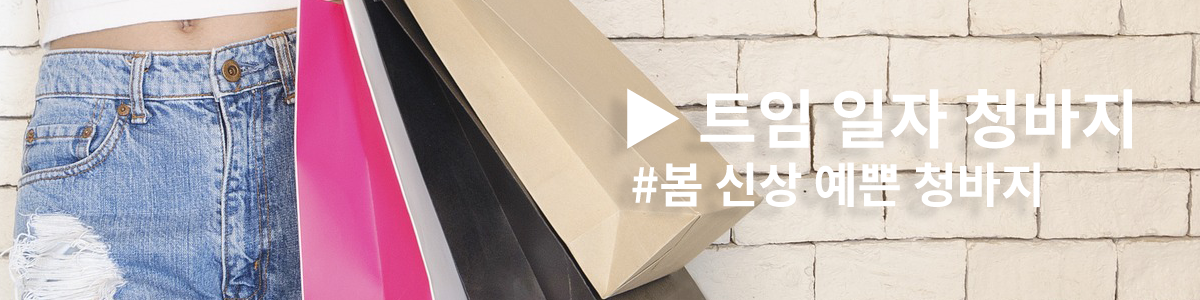
<style>
.page{position:relative;width:1200px;height:300px}
.page>*{position:absolute;margin:0}
.t1{font:48px "NotoSansKR-Bold";color:#ffffff}
.t2{font:64px "NotoSansKR-Bold";color:#ffffff}
</style>
<div class="page">
<p class="t1" style="left:627px;top:88px;width:505px;height:119px"><span class="t2">▶ 트임 일자 청바지<br> </span>#봄 신상 예쁜 청바지</p>
</div>
